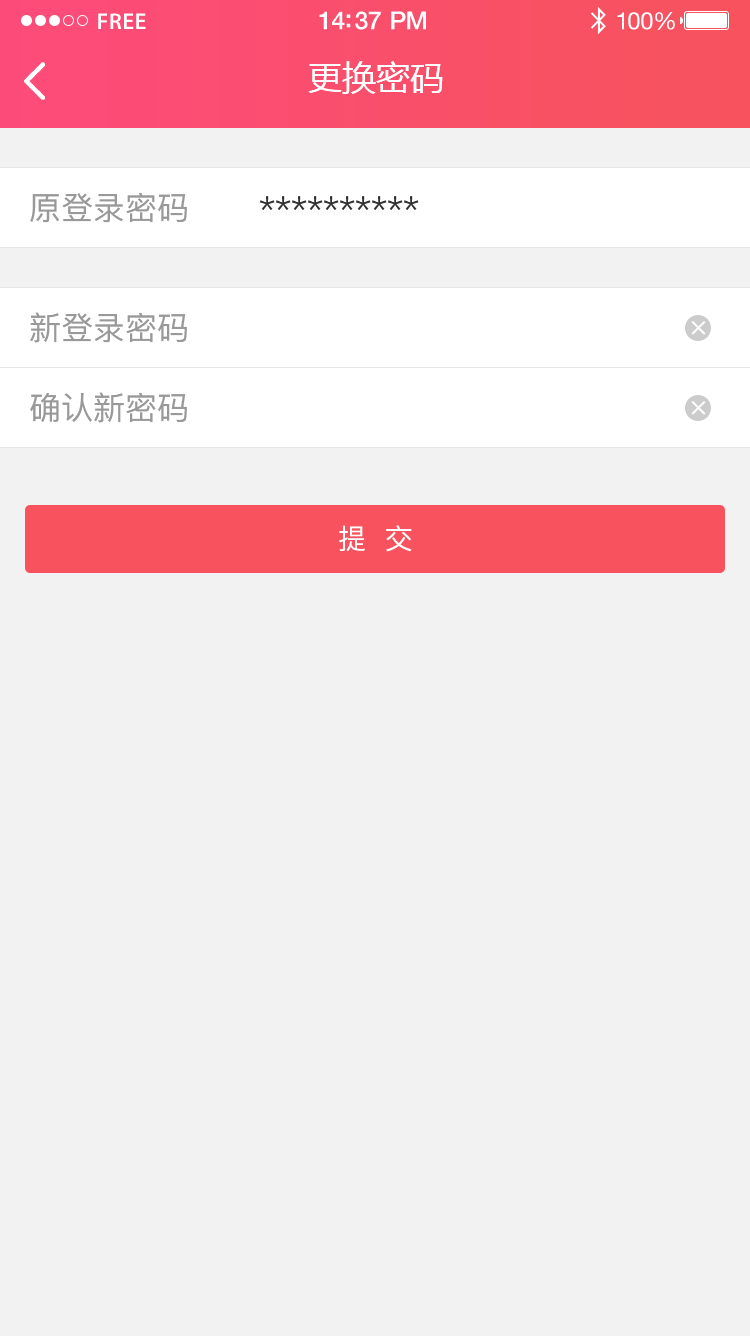
<style>
.page{position:relative;width:750px;height:1336px;background:#f2f2f2}
.page>*{position:absolute;margin:0}
.t1{font:23px "MyriadPro-Semibold";letter-spacing:0.02em;color:#ffffff}
.t2{font:25px "HelveticaNeue-Medium";letter-spacing:-0.02em;color:#ffffff}
.t3{font:24px "HelveticaNeue";letter-spacing:-0.02em;color:#ffffff}
.t4{font:34px "MicrosoftYaHei";color:#ffffff;text-transform:uppercase}
.t5{font:32px "PingFang-SC-Medium";color:#999999;text-transform:uppercase}
.t6{font:32px "PingFang-SC-Medium";color:#333333;text-transform:uppercase}
.t7{font:28px "PingFang-SC-Medium";color:#ffffff;text-transform:uppercase}
</style>
<div class="page">
<p class="t1" style="left:98px;top:13px;width:48px;height:16px">FREE</p>
<p class="t2" style="left:319px;top:11px;width:107px;height:19px">14:37 PM</p>
<p class="t3" style="left:617px;top:12px;width:58px;height:18px">100%</p>
<p class="t4" style="left:308px;top:61px;width:135px;height:33px">更换密码</p>
<p class="t5" style="left:30px;top:192px;width:157px;height:31px">原登录密码</p>
<p class="t6" style="left:259px;top:196px;width:160px;height:14px">**********</p>
<p class="t5" style="left:30px;top:312px;width:157px;height:31px">新登录密码</p>
<p class="t7" style="left:691px;top:321px;width:15px;height:14px">×</p>
<p class="t5" style="left:30px;top:392px;width:157px;height:31px">确认新密码</p>
<p class="t7" style="left:691px;top:401px;width:15px;height:14px">×</p>
<p class="t7" style="left:339px;top:525px;width:73px;height:27px">提  交</p>
</div>
